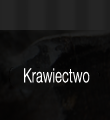
<style>
.page{position:relative;width:110px;height:120px}
.page>*{position:absolute;margin:0}
.t1{font:19.6px "HelveticaNeueCE-Light";letter-spacing:0.025em;color:#ffffff;scale:0.64 1}
</style>
<div class="page">
<p class="t1" style="left:24px;top:68px;width:66px;height:15px">Krawiectwo</p>
</div>
